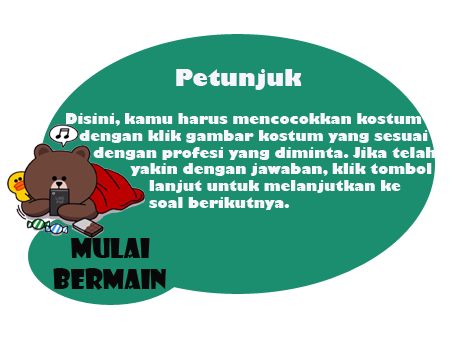
<style>
.page{position:relative;width:454px;height:340px;background:#ffffff}
.page>*{position:absolute;margin:0}
.t1{font:22px "GillSans-UltraBold";color:#f7f5fb}
.t2{font:14px "GillSans-UltraBold";color:#f7f6fa}
.t3{font:26px "ShowcardGothic-Reg";color:#080808}
</style>
<div class="page">
<p class="t1" style="left:176px;top:69px;width:126px;height:21px">Petunjuk</p>
<p class="t2" style="left:66px;top:113px;width:370px;height:97px">Disini, kamu harus mencocokkan kostum<br>   dengan klik gambar kostum yang sesuai<br>      dengan profesi yang diminta. Jika telah<br>              yakin dengan jawaban, klik tombol<br>                  lanjut untuk melanjutkan ke<br>                  soal berikutnya.</p>
<p class="t3" style="left:53px;top:238px;width:113px;height:52px;text-align:center">Mulai<br>bermain</p>
</div>
